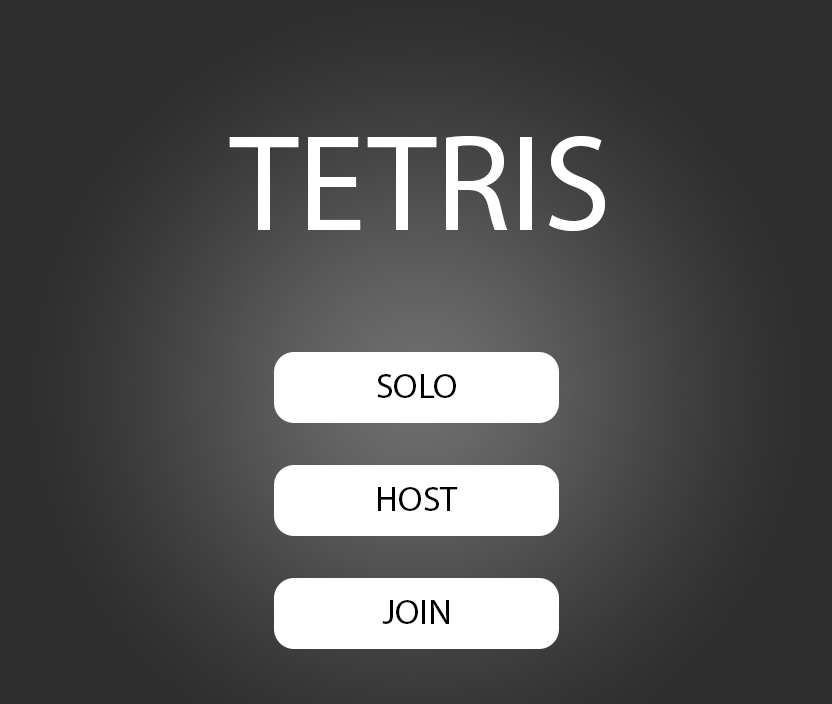
<style>
.page{position:relative;width:832px;height:704px;background:#2e2e2e}
.page>*{position:absolute;margin:0}
.t1{font:137.6px "MyriadPro-Regular";color:#ffffff}
.t2{font:35.4px "MyriadPro-Regular";color:#000000}
</style>
<div class="page">
<p class="t1" style="left:229px;top:135px;width:376px;height:97px">TETRIS</p>
<p class="t2" style="left:377px;top:374px;width:79px;height:24px">SOLO</p>
<p class="t2" style="left:378px;top:487px;width:80px;height:24px">HOST</p>
<p class="t2" style="left:382px;top:600px;width:67px;height:24px">JOIN</p>
</div>
